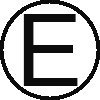
<style>
.page{position:relative;width:100px;height:100px;background:#ffffff}
.page>*{position:absolute;margin:0}
.t1{font:100px "ArialMT";color:#0c0c0d}
</style>
<div class="page">
<p class="t1" style="left:23px;top:14px;width:55px;height:72px">E</p>
</div>
